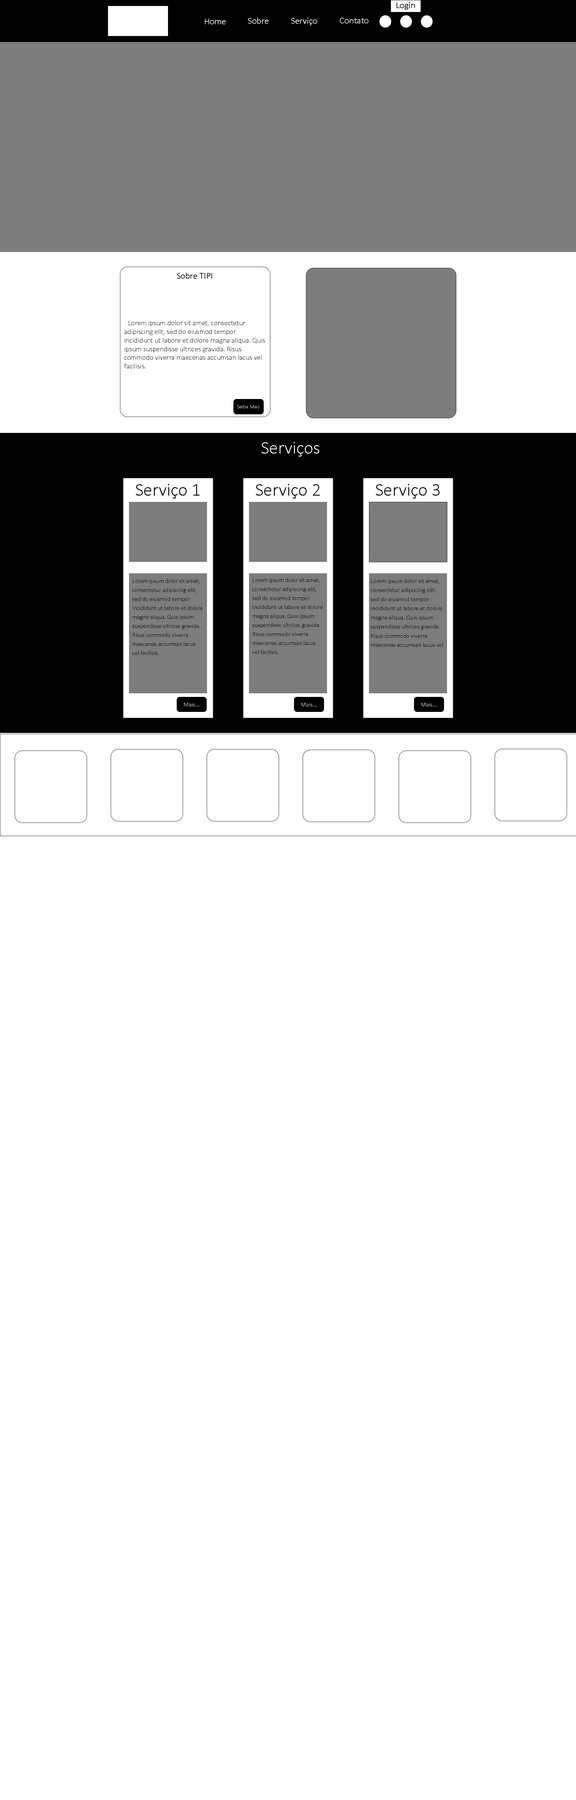
<style>
.page{position:relative;width:576px;height:1800px;background:#ffffff}
.page>*{position:absolute;margin:0}
.t1{font:9px "Calibri";color:#000000}
.t2{font:9px "Calibri";color:#ffffff}
.t3{font:9px "Calibri-Light";color:#000000}
.t4{font:7.2px "Calibri-Light";color:#000000}
.t5{font:5.3px "Calibri-Light";color:#ffffff}
.t6{font:18px "Calibri-Light";color:#ffffff}
.t7{font:18px "Calibri-Light";color:#000000}
.t8{font:6px/9px "Calibri-Light";color:#000000}
.t9{font:6.1px/9.2px "Calibri-Light";color:#000000}
.t10{font:6px "Calibri-Light";color:#ffffff}
</style>
<div class="page">
<p class="t1" style="left:397px;top:2px;width:18px;height:8px">Login</p>
<p class="t2" style="left:248px;top:18px;width:20px;height:6px">Sobre</p>
<p class="t2" style="left:291px;top:18px;width:26px;height:7px">Serviço</p>
<p class="t2" style="left:340px;top:18px;width:28px;height:5px">Contato</p>
<p class="t2" style="left:205px;top:19px;width:21px;height:5px">Home</p>
<p class="t3" style="left:177px;top:273px;width:35px;height:6px">Sobre TIPI</p>
<p class="t4" style="left:124px;top:320px;width:141px;height:48px">Lorem ipsum dolor sit amet, consectetur adipiscing elit, sed do eiusmod tempor incididunt ut labore et dolore magna aliqua. Quis ipsum suspendisse ultrices gravida. Risus commodo viverra maecenas accumsan lacus vel facilisis.</p>
<p class="t5" style="left:237px;top:405px;width:23px;height:3px">Saiba Mais</p>
<p class="t6" style="left:262px;top:442px;width:57px;height:15px">Serviços</p>
<p class="t7" style="left:136px;top:484px;width:64px;height:15px">Serviço 1</p>
<p class="t7" style="left:256px;top:484px;width:64px;height:15px">Serviço 2</p>
<p class="t7" style="left:376px;top:484px;width:64px;height:15px">Serviço 3</p>
<p class="t8" style="left:133px;top:579px;width:69px;height:76px">Lorem ipsum dolor sit amet, consectetur adipiscing elit, sed do eiusmod tempor incididunt ut labore et dolore magna aliqua. Quis ipsum suspendisse ultrices gravida. Risus commodo viverra maecenas accumsan lacus vel facilisis.</p>
<p class="t8" style="left:253px;top:578px;width:69px;height:76px">Lorem ipsum dolor sit amet, consectetur adipiscing elit, sed do eiusmod tempor incididunt ut labore et dolore magna aliqua. Quis ipsum suspendisse ultrices gravida. Risus commodo viverra maecenas accumsan lacus vel facilisis.</p>
<p class="t9" style="left:371px;top:579px;width:72px;height:68px">Lorem ipsum dolor sit amet, consectetur adipiscing elit, sed do eiusmod tempor incididunt ut labore et dolore magna aliqua. Quis ipsum suspendisse ultrices gravida. Risus commodo viverra maecenas accumsan lacus vel facilisis.</p>
<p class="t10" style="left:184px;top:703px;width:15px;height:3px">Mais...</p>
<p class="t10" style="left:302px;top:703px;width:15px;height:3px">Mais...</p>
<p class="t10" style="left:422px;top:703px;width:14px;height:3px">Mais...</p>
</div>
